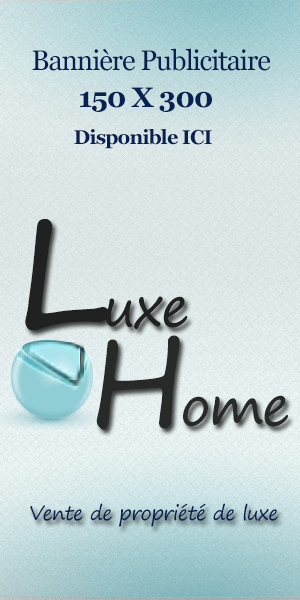
<style>
.page{position:relative;width:300px;height:600px}
.page>*{position:absolute;margin:0}
.t1{font:28px "Vani";letter-spacing:-0.04em;color:#062152}
.t2{font:28px "Vani-Bold";letter-spacing:-0.04em;color:#062152}
.t3{font:20px "Vani-Bold";letter-spacing:-0.04em;color:#062152}
.t4{font:54px "SegoePrint";letter-spacing:-0.04em;color:#202121}
.t5{font:150px "SegoePrint";letter-spacing:-0.04em;color:#202121}
.t6{font:54px "SegoePrint";letter-spacing:-0.04em;color:#282929}
.t7{font:120px "SegoePrint";letter-spacing:-0.04em;color:#282929}
.t8{font:20px "SegoePrint";letter-spacing:-0.04em;color:#062152}
</style>
<div class="page">
<p class="t1" style="left:32px;top:48px;width:239px;height:23px">Bannière Publicitaire</p>
<p class="t2" style="left:80px;top:87px;width:132px;height:25px">150 X 300</p>
<p class="t3" style="left:74px;top:129px;width:138px;height:20px">Disponible ICI</p>
<p class="t4" style="left:25px;top:219px;width:163px;height:112px"><span class="t5">L</span>uxe</p>
<p class="t6" style="left:96px;top:335px;width:192px;height:95px"><span class="t7">H</span>ome</p>
<p class="t8" style="left:30px;top:503px;width:248px;height:24px">Vente de propriété de luxe</p>
</div>
